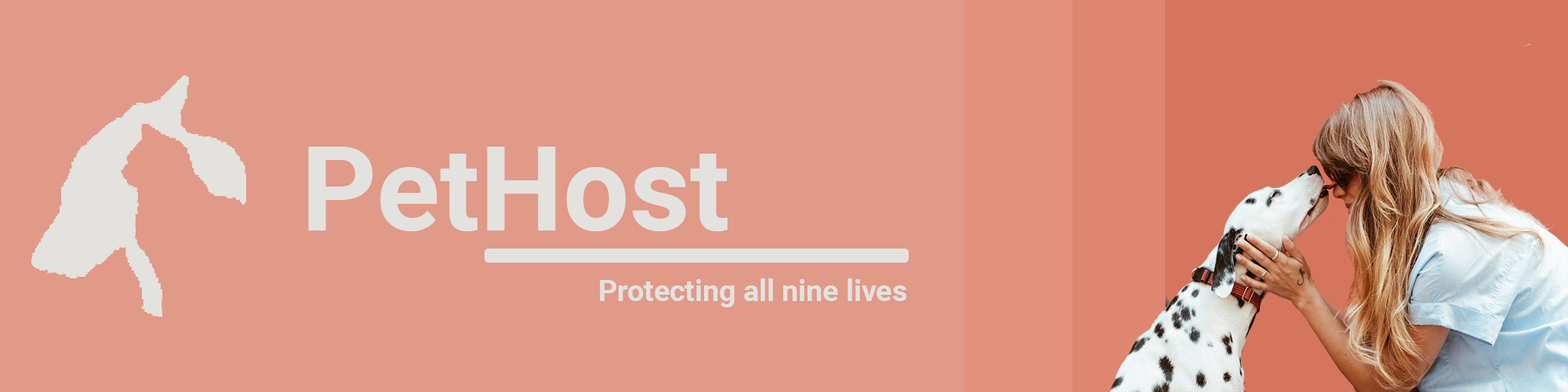
<style>
.page{position:relative;width:1568px;height:392px;background:#e19988}
.page>*{position:absolute;margin:0}
.t1{font:117.6px "Roboto-Bold";color:#e3e2df}
.t2{font:29.4px "Roboto-Bold";color:#e3e2df}
</style>
<div class="page">
<p class="t1" style="left:308px;top:147px;width:420px;height:84px">PetHost</p>
<p class="t2" style="left:600px;top:278px;width:307px;height:29px">Protecting all nine lives</p>
</div>
